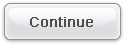
<style>
.page{position:relative;width:125px;height:46px}
.page>*{position:absolute;margin:0}
.t1{font:14px "ArialMT";color:#4d4d4d;font-weight:bold}
</style>
<div class="page">
<p class="t1" style="left:30px;top:17px;width:63px;height:10px">Continue</p>
</div>
